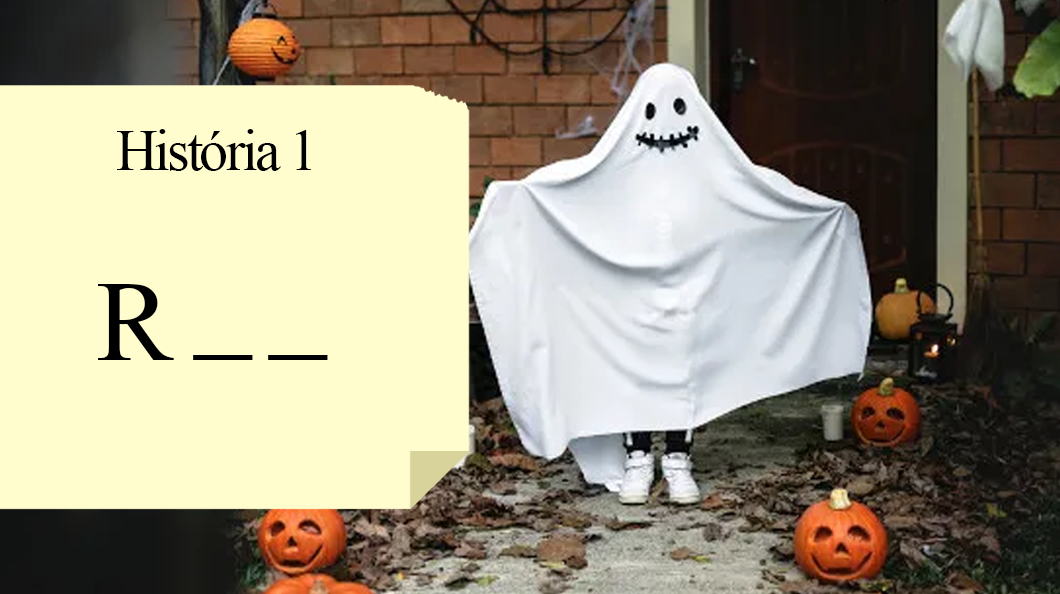
<style>
.page{position:relative;width:1060px;height:594px;background:#fffcce}
.page>*{position:absolute;margin:0}
.t1{font:57.5px "TimesNewRomanPSMT";letter-spacing:-0.05em;color:#000000}
.t2{font:115px "TimesNewRomanPSMT";letter-spacing:-0.05em;color:#000000}
</style>
<div class="page">
<p class="t1" style="left:117px;top:129px;width:194px;height:42px">História 1</p>
<p class="t2" style="left:98px;top:284px;width:76px;height:76px">R</p>
<p class="t2" style="left:193px;top:355px;width:135px;height:5px">_ _</p>
</div>
